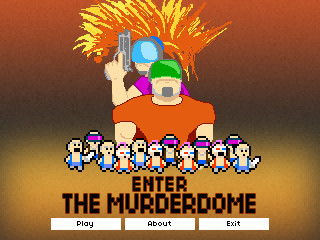
<style>
.page{position:relative;width:320px;height:240px}
.page>*{position:absolute;margin:0}
.t1{font:22.5px "04b03";letter-spacing:0.075em;color:#000000;scale:0.8 1}
.t2{font:30px "04b03";color:#000000;scale:0.8 1}
</style>
<div class="page">
<p class="t1" style="left:133px;top:177px;width:53px;height:14px">ENTER</p>
<p class="t2" style="left:63px;top:194px;width:192px;height:19px">THE MURDERDOME</p>
</div>
